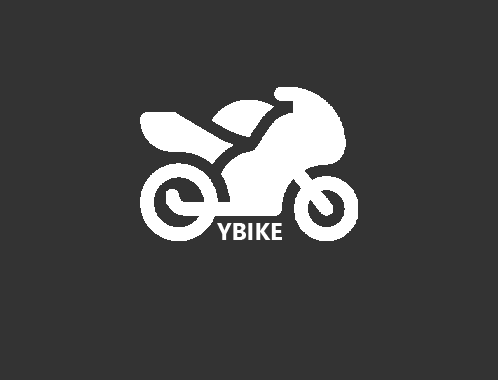
<style>
.page{position:relative;width:498px;height:380px;background:#333333}
.page>*{position:absolute;margin:0}
.t1{font:24px "SegoeUI-Bold";color:#ffffff}
</style>
<div class="page">
<p class="t1" style="left:217px;top:223px;width:65px;height:17px">YBIKE</p>
</div>
